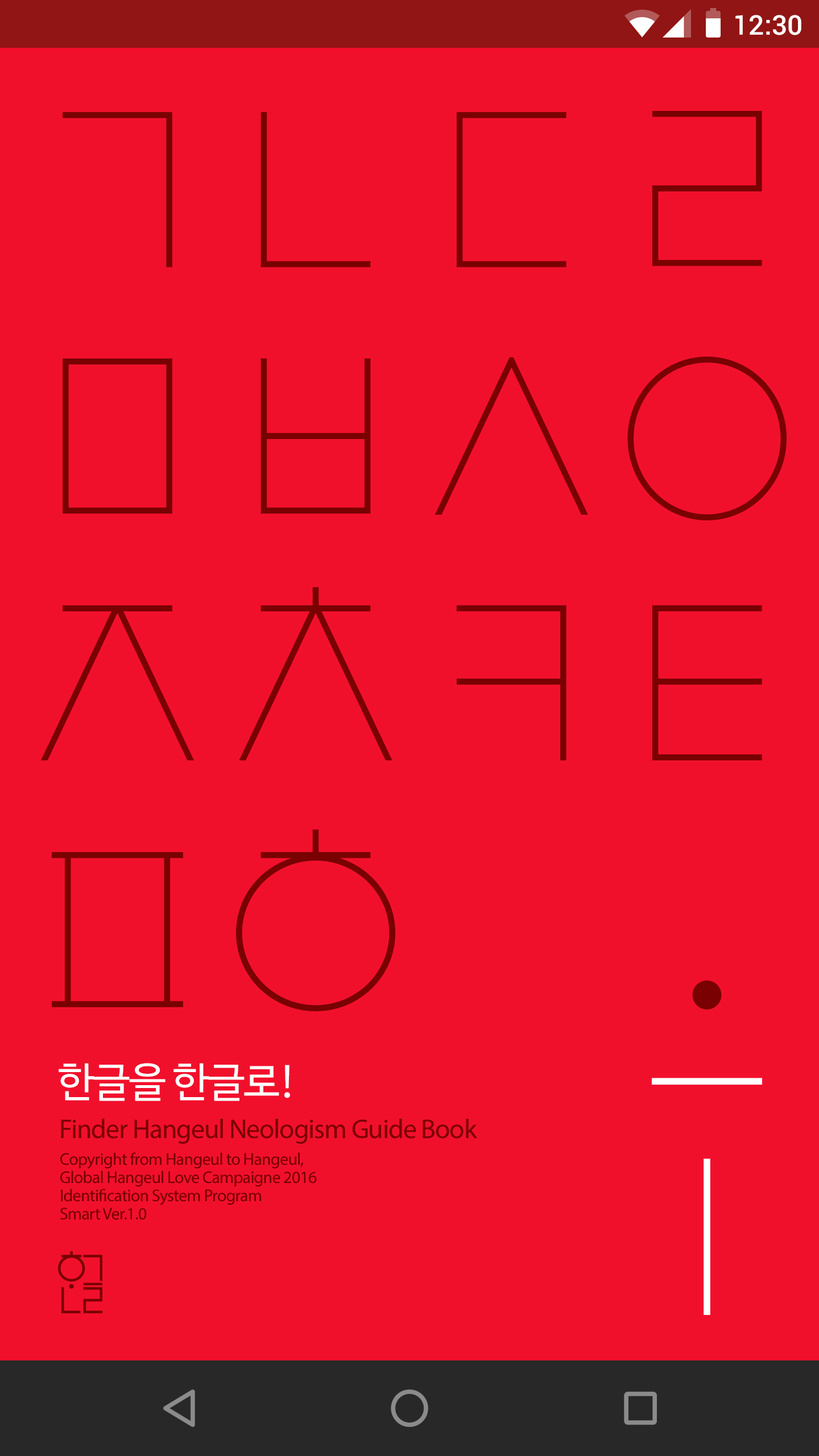
<style>
.page{position:relative;width:819px;height:1456px;background:#f1102c}
.page>*{position:absolute;margin:0}
.t1{font:27.3px "Roboto-Medium";color:#ffffff}
.t2{font:40.9px "NanumBarunGothic";letter-spacing:-0.025em;color:#ffffff}
.t3{font:27.3px "MyriadPro-Regular";letter-spacing:-0.025em;color:#790101}
.t4{font:17.1px/18.2px "MyriadPro-Regular";letter-spacing:-0.025em;color:#710000}
</style>
<div class="page">
<p class="t1" style="left:735px;top:15px;width:66px;height:20px">12:30</p>
<p class="t2" style="left:59px;top:1063px;width:231px;height:38px">한글을 한글로!</p>
<p class="t3" style="left:61px;top:1119px;width:416px;height:25px">Finder Hangeul Neologism Guide Book</p>
<p class="t4" style="left:60px;top:1152px;width:257px;height:68px">Copyright from Hangeul to Hangeul,<br>Global Hangeul Love Campaigne 2016<br>Identification System Program <br>Smart Ver.1.0</p>
</div>
